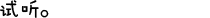
<style>
.page{position:relative;width:210px;height:18px;background:#ffffff}
.page>*{position:absolute;margin:0}
.t1{font:22px "¢è?";color:#000000}
</style>
<div class="page">
<p class="t1" style="left:0px;top:0px;width:49px;height:18px">试听。</p>
</div>
